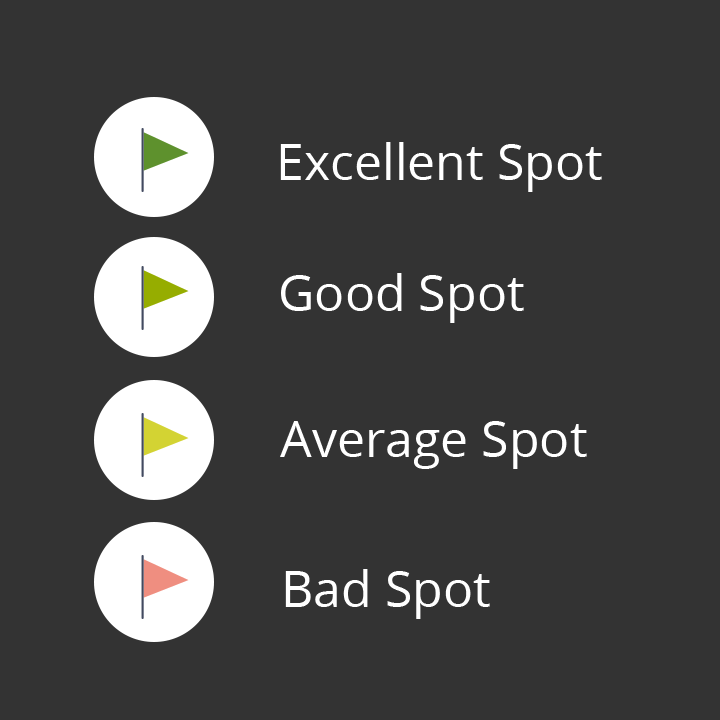
<style>
.page{position:relative;width:720px;height:720px;background:#333333}
.page>*{position:absolute;margin:0}
.t1{font:50px "OpenSans";color:#ffffff}
</style>
<div class="page">
<p class="t1" style="left:280px;top:142px;width:322px;height:50px">Excellent Spot</p>
<p class="t1" style="left:281px;top:273px;width:243px;height:50px">Good Spot</p>
<p class="t1" style="left:280px;top:421px;width:307px;height:48px">Average Spot</p>
<p class="t1" style="left:285px;top:569px;width:205px;height:50px">Bad Spot</p>
</div>
